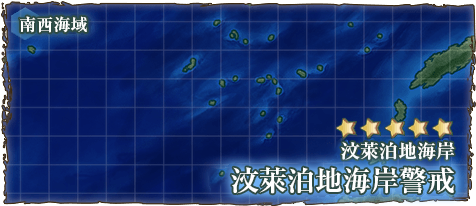
<style>
.page{position:relative;width:476px;height:206px}
.page>*{position:absolute;margin:0}
.t1{font:17px "RyuminPr6N-ExBold";color:#ffffff}
.t2{font:19px "RyuminPro-ExBold";color:#ffffff}
.t3{font:28px "RyuminPro-ExBold";color:#ffffff}
</style>
<div class="page">
<p class="t1" style="left:19px;top:16px;width:68px;height:17px">南西海域</p>
<p class="t2" style="left:341px;top:141px;width:114px;height:19px">汶萊泊地海岸</p>
<p class="t3" style="left:231px;top:167px;width:223px;height:27px">汶萊泊地海岸警戒</p>
</div>
